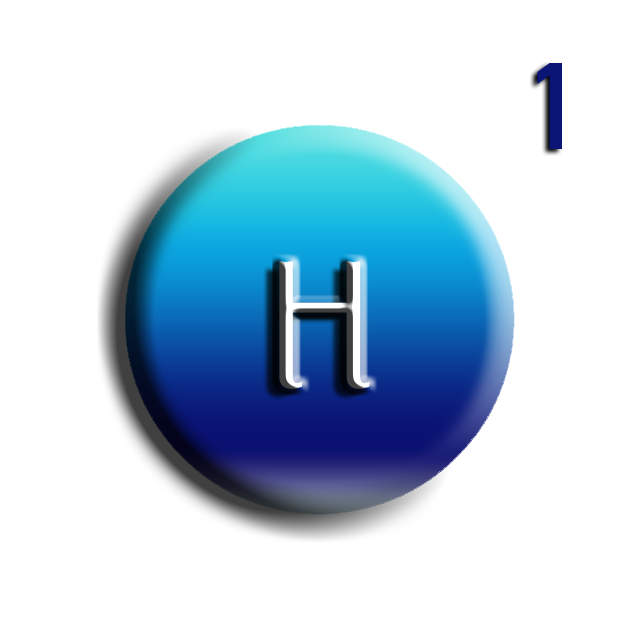
<style>
.page{position:relative;width:640px;height:640px;background:#ffffff}
.page>*{position:absolute;margin:0}
.t1{font:129px "TGL0-1451Engschrift";color:#0b1576}
.t2{font:194px "PortCredit-Regular"}
</style>
<div class="page">
<p class="t1" style="left:537px;top:63px;width:25px;height:86px">1</p>
<p class="t2" style="left:279px;top:261px;width:91px;height:128px">H</p>
</div>
